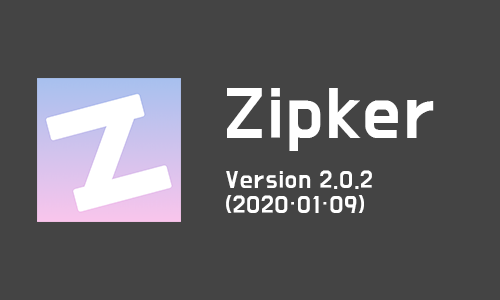
<style>
.page{position:relative;width:500px;height:300px;background:#444444}
.page>*{position:absolute;margin:0}
.t1{font:59px "BMDoHyeon";letter-spacing:0.06em;color:#ffffff}
.t2{font:20px/25.4px "BMDoHyeon";letter-spacing:0.06em;color:#ffffff}
</style>
<div class="page">
<p class="t1" style="left:227px;top:88px;width:207px;height:63px">Zipker</p>
<p class="t2" style="left:226px;top:170px;width:146px;height:43px">Version 2.0.2<br>(2020·01·09)</p>
</div>
